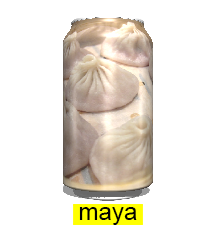
<style>
.page{position:relative;width:216px;height:232px;background:#ffffff}
.page>*{position:absolute;margin:0}
.t1{font:24px "ArialMT";color:#000000}
</style>
<div class="page">
<p class="t1" style="left:79px;top:207px;width:58px;height:18px">maya</p>
</div>
